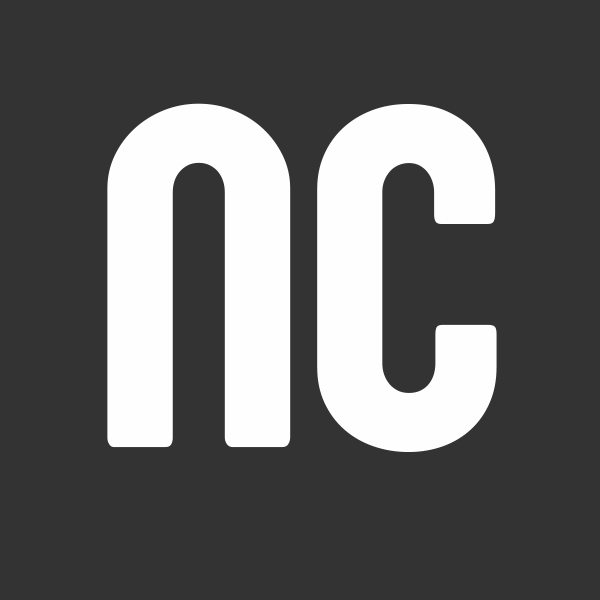
<style>
.page{position:relative;width:600px;height:600px;background:#333333}
.page>*{position:absolute;margin:0}
.t1{font:500.1px "SugoProDisplayTrial-Regular";color:#fefefe}
</style>
<div class="page">
<p class="t1" style="left:107px;top:103px;width:390px;height:349px">NC</p>
</div>
